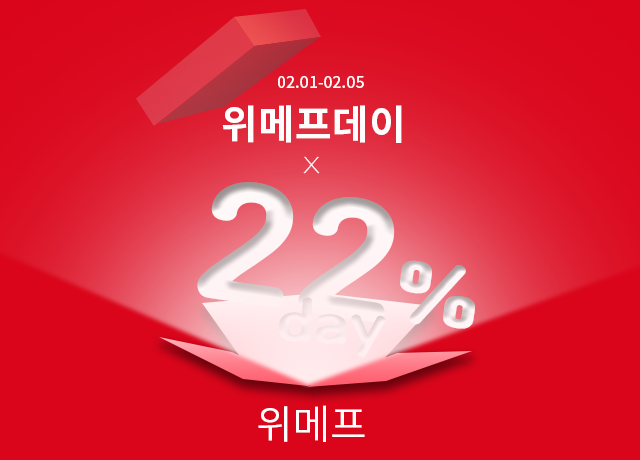
<style>
.page{position:relative;width:640px;height:460px;background:#da051b}
.page>*{position:absolute;margin:0}
.t1{font:15.8px "NotoSansKR-Medium";color:#ffffff}
.t2{font:40.1px "NotoSansKR-Bold";color:#ffffff}
.t3{font:22.8px "YDIYGO310";color:#ffffff;scale:1.15 1}
.t4{font:158.1px "Cafe24Ssurround"}
.t5{font:80px "Cafe24Ssurround"}
.t6{font:40.1px "NotoSansKR-Regular";color:#ffffff}
</style>
<div class="page">
<p class="t1" style="left:278px;top:76px;width:86px;height:12px">02.01-02.05</p>
<p class="t2" style="left:222px;top:105px;width:180px;height:38px">위메프데이</p>
<p class="t3" style="left:303px;top:156px;width:17px;height:18px">X</p>
<p class="t4" style="left:197px;top:182px;width:278px;height:147px;rotate:8deg">22<span class="t5">%</span></p>
<p class="t6" style="left:258px;top:405px;width:107px;height:37px">위메프</p>
</div>
